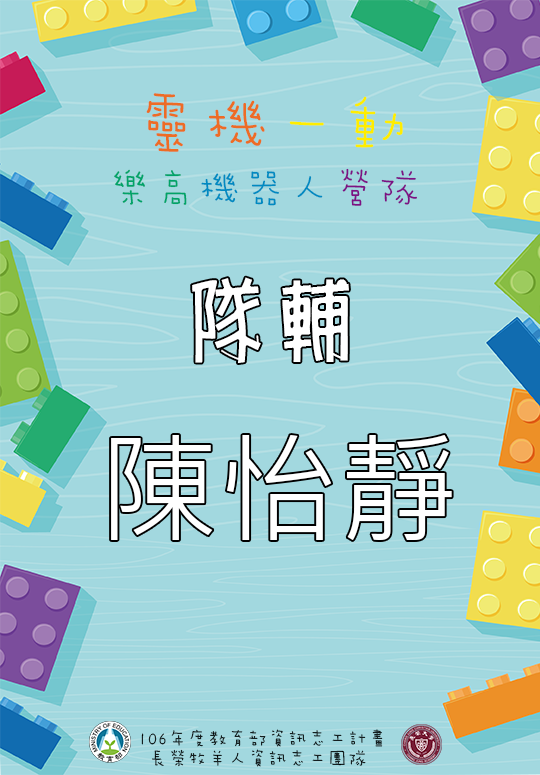
<style>
.page{position:relative;width:540px;height:775px;background:#a2d8df}
.page>*{position:absolute;margin:0}
.t1{font:45px/25px "DFEr-W3-WIN-BF";color:#008ac1}
.t2{font:50px "DFEr-W3-WIN-BF";color:#ed6c25}
.t3{font:70px/25px "DFEr-W3-WIN-BF";color:#ed6c25}
.t4{font:70px/25px "DFEr-W3-WIN-BF";color:#feed00}
.t5{font:45px/25px "DFEr-W3-WIN-BF";color:#00a368}
.t6{font:45px/25px "DFEr-W3-WIN-BF";color:#7d1184}
.t7{font:90px "Pop1-Bold";color:#ffffff}
.t8{font:120px "MicrosoftJhengHeiRegular";color:#ffffff}
.t9{font:20px/20.8px "DFEr-W3-WIN-BF";color:#000000}
</style>
<div class="page">
<p class="t1" style="left:114px;top:93px;width:303px;height:113px"><span class="t2"> </span><span class="t3">靈機</span><span class="t4">一動<br></span><span class="t5">樂高</span>機器人<span class="t6">營隊</span></p>
<p class="t7" style="left:192px;top:277px;width:157px;height:86px">隊輔</p>
<p class="t8" style="left:111px;top:435px;width:341px;height:105px">陳怡靜</p>
<p class="t9" style="left:141px;top:729px;width:242px;height:38px">106年度教育部資訊志工計畫<br> 長榮牧羊人資訊志工團隊</p>
</div>
